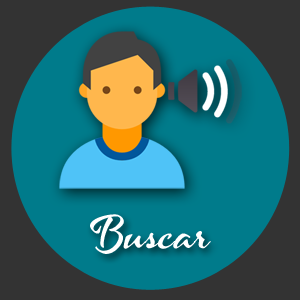
<style>
.page{position:relative;width:300px;height:300px;background:#007b8b}
.page>*{position:absolute;margin:0}
.t1{font:56.1px "AzaleaW00-Smth";color:#ffffff}
</style>
<div class="page">
<p class="t1" style="left:90px;top:214px;width:121px;height:40px">Buscar</p>
</div>
